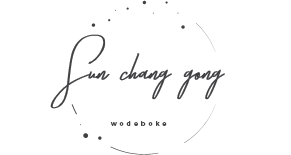
<style>
.page{position:relative;width:291px;height:155px;background:#ffffff}
.page>*{position:absolute;margin:0}
.t1{font:55.5px "TakenbyVulturesDemo";color:#414042}
.t2{font:6.4px "Montserrat-Regular";letter-spacing:0.5em;color:#414042}
</style>
<div class="page">
<p class="t1" style="left:50px;top:34px;width:175px;height:75px">Sun chang gong</p>
<p class="t2" style="left:110px;top:121px;width:57px;height:5px">wodeboke</p>
</div>
